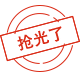
<style>
.page{position:relative;width:80px;height:77px;background:#ffffff}
.page>*{position:absolute;margin:0}
.t1{font:16px "AdobeHeitiStd-Regular";color:#da2a15}
</style>
<div class="page">
<p class="t1" style="left:17px;top:26px;width:45px;height:25px;rotate:-15deg">抢光了</p>
</div>
